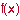
<style>
.page{position:relative;width:20px;height:20px;background:#ffffff}
.page>*{position:absolute;margin:0}
.t1{font:13.9px "Helvetica";color:#b60425}
</style>
<div class="page">
<p class="t1" style="left:1px;top:3px;width:18px;height:13px">f(x)</p>
</div>
